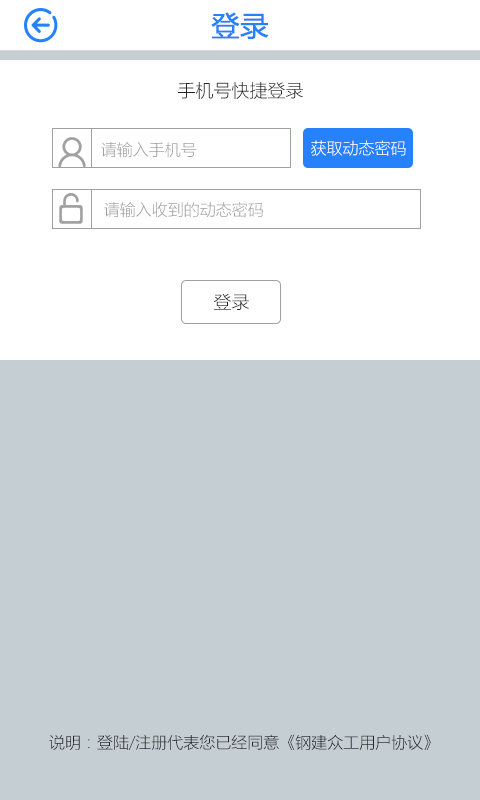
<style>
.page{position:relative;width:480px;height:800px;background:#c4ced3}
.page>*{position:absolute;margin:0}
.t1{font:28px "MicrosoftYaHei";color:#2681fc;font-weight:bold}
.t2{font:18px "MicrosoftYaHeiLight";color:#252323}
.t3{font:16px "MicrosoftYaHeiLight";color:#a0a0a0}
.t4{font:16px "MicrosoftYaHeiLight";color:#ffffff}
.t5{font:16px "MicrosoftYaHeiLight";color:#252323}
</style>
<div class="page">
<p class="t1" style="left:211px;top:12px;width:58px;height:27px">登录</p>
<p class="t2" style="left:178px;top:82px;width:125px;height:17px">手机号快捷登录</p>
<p class="t3" style="left:101px;top:142px;width:96px;height:16px">请输入手机号</p>
<p class="t4" style="left:311px;top:140px;width:95px;height:16px">获取动态密码</p>
<p class="t3" style="left:104px;top:202px;width:159px;height:16px">请输入收到的动态密码</p>
<p class="t2" style="left:213px;top:293px;width:36px;height:17px">登录</p>
<p class="t5" style="left:49px;top:734px;width:382px;height:16px">说明：登陆/注册代表您已经同意《钢建众工用户协议》</p>
</div>
